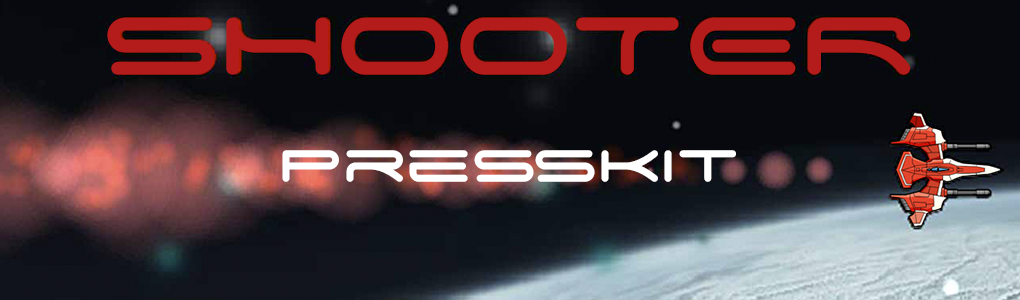
<style>
.page{position:relative;width:1020px;height:300px}
.page>*{position:absolute;margin:0}
.t1{font:130px "SpaceAge";color:#b41c1c}
.t2{font:72px "SpaceAge";color:#ffffff}
</style>
<div class="page">
<p class="t1" style="left:107px;top:17px;width:804px;height:58px">SHOOTER</p>
<p class="t2" style="left:282px;top:150px;width:454px;height:32px">Presskit</p>
</div>
